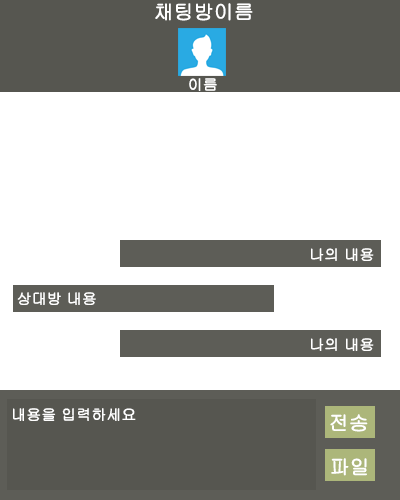
<style>
.page{position:relative;width:400px;height:500px;background:#ffffff}
.page>*{position:absolute;margin:0}
.t1{font:20px "Gulim";letter-spacing:-0.025em;color:#ffffff;font-weight:bold}
.t2{font:15px "Gulim";letter-spacing:-0.025em;color:#ffffff;font-weight:bold}
</style>
<div class="page">
<p class="t1" style="left:155px;top:3px;width:98px;height:18px">채팅방이름</p>
<p class="t2" style="left:189px;top:78px;width:28px;height:13px">이름</p>
<p class="t2" style="left:311px;top:248px;width:63px;height:13px">나의 내용</p>
<p class="t2" style="left:17px;top:292px;width:79px;height:13px">상대방 내용</p>
<p class="t2" style="left:311px;top:338px;width:63px;height:13px">나의 내용</p>
<p class="t2" style="left:13px;top:408px;width:123px;height:13px">내용을 입력하세요</p>
<p class="t1" style="left:330px;top:414px;width:38px;height:18px">전송</p>
<p class="t1" style="left:331px;top:458px;width:36px;height:18px">파일</p>
</div>
